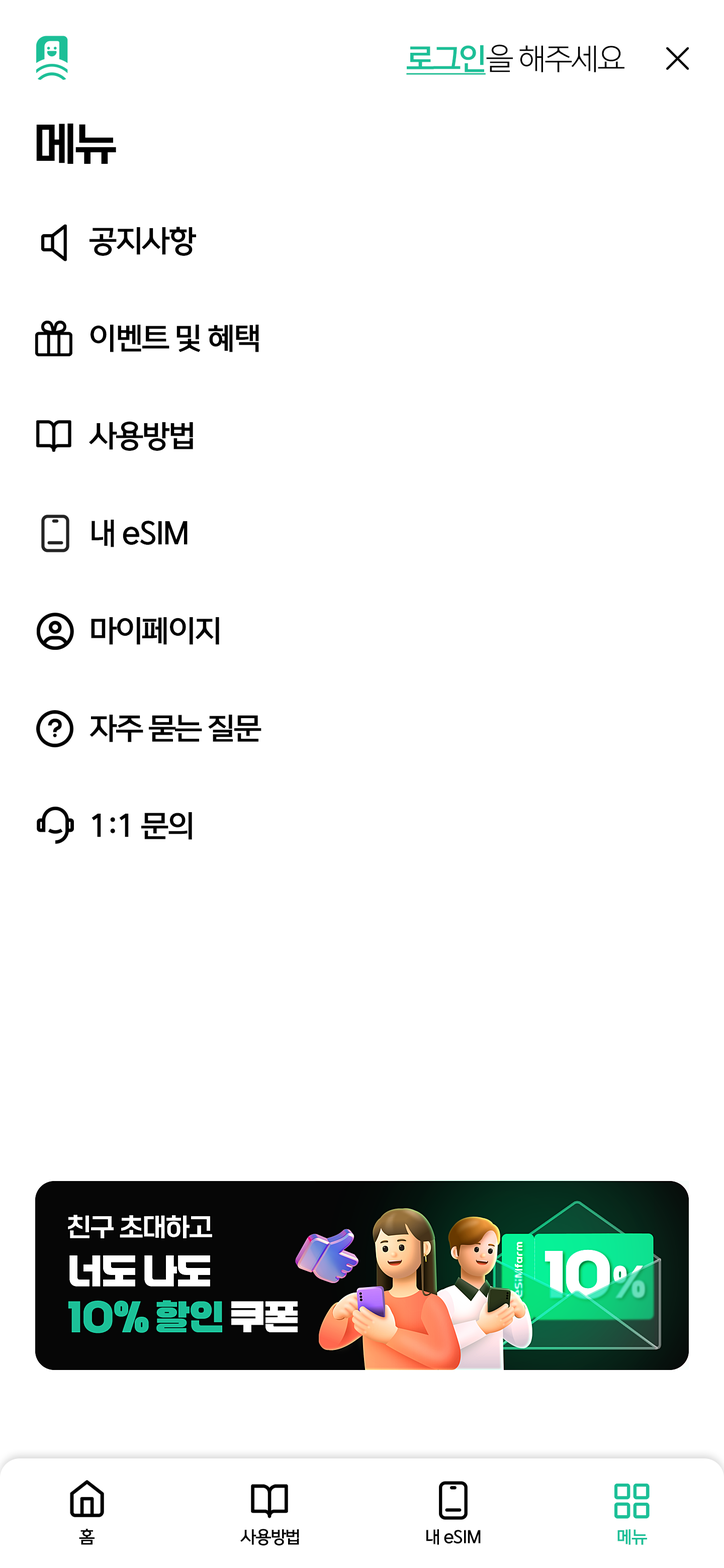
<style>
.page{position:relative;width:724px;height:1568px;background:#ffffff}
.page>*{position:absolute;margin:0}
.t1{font:30.2px "ONEMobileOTFLight";letter-spacing:-0.05em;color:#000000}
.t2{font:30.2px "ONEMobileOTFBold";letter-spacing:-0.05em;color:#1cbf97;text-decoration:underline}
.t3{font:45.2px "ONEMobileTitleOTFRegular";letter-spacing:-0.05em;color:#000000}
.t4{font:30.2px/97.5px "ONEMobileOTFBold";letter-spacing:-0.05em;color:#000000}
.t5{font:17.1px "ONEMobileOTFBold";letter-spacing:-0.05em;color:#000000}
.t6{font:17.1px "ONEMobileOTFBold";letter-spacing:-0.05em;color:#1cbf97}
</style>
<div class="page">
<p class="t1" style="left:406px;top:44px;width:218px;height:31px"><span class="t2">로그인</span>을 해주세요</p>
<p class="t3" style="left:36px;top:123px;width:80px;height:41px">메뉴</p>
<p class="t4" style="left:89px;top:227px;width:172px;height:613px">공지사항<br>이벤트 및 혜택<br>사용방법<br>내 eSIM<br>마이페이지<br>자주 묻는 질문<br>1:1 문의</p>
<p class="t5" style="left:79px;top:1529px;width:15px;height:16px">홈</p>
<p class="t5" style="left:240px;top:1529px;width:59px;height:17px">사용방법</p>
<p class="t5" style="left:426px;top:1529px;width:54px;height:16px">내 eSIM</p>
<p class="t6" style="left:617px;top:1529px;width:30px;height:16px">메뉴</p>
</div>
